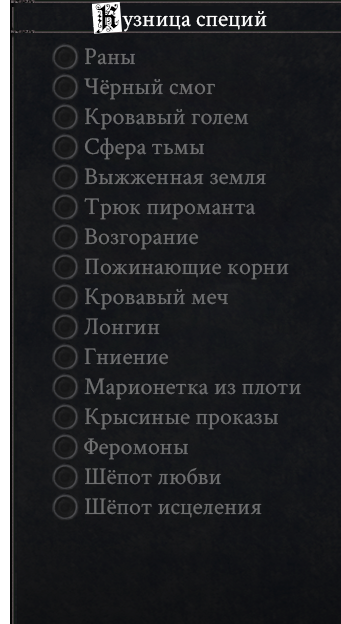
<style>
.page{position:relative;width:341px;height:624px}
.page>*{position:absolute;margin:0}
.t1{font:30px "FortunaGothicFlorishC";color:#000000}
.t2{font:24px "CrimsonText-Regular";color:#ffffff}
.t3{font:24px "CrimsonText-Regular";color:#6d6e6f}
.t4{font:24px "CrimsonText-Regular";color:#6e6e6f}
.t5{font:24px "CrimsonText-Regular";color:#6e6f6f}
</style>
<div class="page">
<p class="t1" style="left:95px;top:4px;width:24px;height:29px">К</p>
<p class="t2" style="left:122px;top:11px;width:145px;height:21px">узница специй</p>
<p class="t3" style="left:85px;top:48px;width:50px;height:17px">Раны</p>
<p class="t4" style="left:84px;top:78px;width:131px;height:22px">Чёрный смог</p>
<p class="t3" style="left:85px;top:108px;width:164px;height:22px">Кровавый голем</p>
<p class="t3" style="left:84px;top:137px;width:120px;height:23px">Сфера тьмы</p>
<p class="t3" style="left:84px;top:168px;width:182px;height:17px">Выжженная земля</p>
<p class="t4" style="left:84px;top:198px;width:172px;height:22px">Трюк пироманта</p>
<p class="t5" style="left:84px;top:228px;width:115px;height:22px">Возгорание</p>
<p class="t4" style="left:85px;top:258px;width:204px;height:22px">Пожинающие корни</p>
<p class="t4" style="left:85px;top:288px;width:143px;height:22px">Кровавый меч</p>
<p class="t3" style="left:84px;top:318px;width:76px;height:17px">Лонгин</p>
<p class="t4" style="left:84px;top:348px;width:85px;height:17px">Гниение</p>
<p class="t4" style="left:84px;top:378px;width:217px;height:22px">Марионетка из плоти</p>
<p class="t4" style="left:85px;top:408px;width:193px;height:22px">Крысиные проказы</p>
<p class="t4" style="left:84px;top:438px;width:104px;height:22px">Феромоны</p>
<p class="t4" style="left:85px;top:467px;width:136px;height:18px">Шёпот любви</p>
<p class="t3" style="left:85px;top:498px;width:177px;height:20px">Шёпот исцеления</p>
</div>
